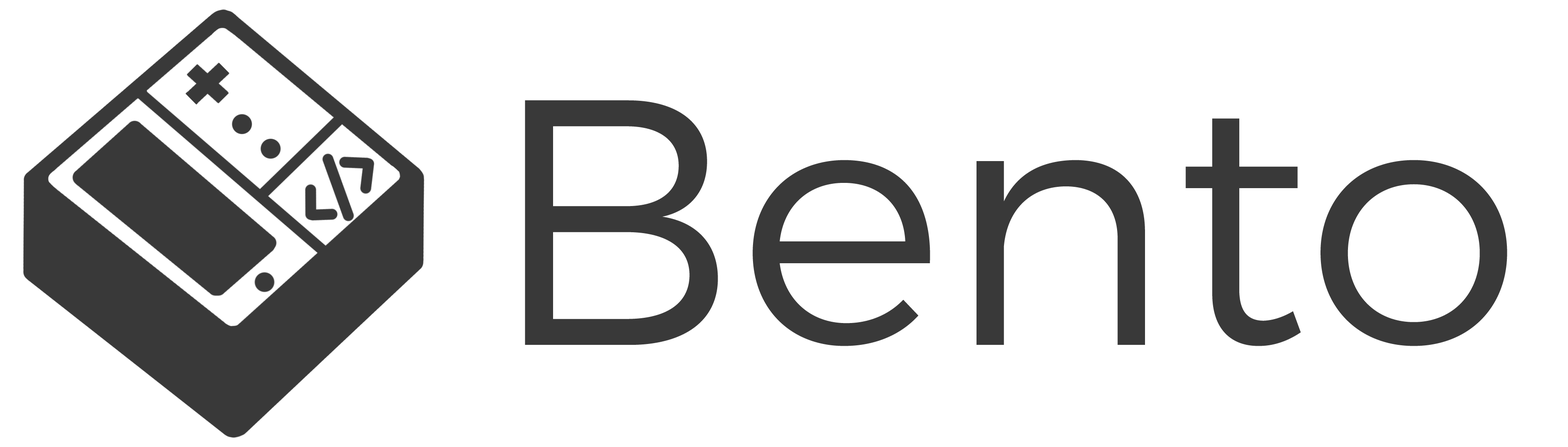
<style>
.page{position:relative;width:1568px;height:447px;background:#ffffff}
.page>*{position:absolute;margin:0}
.t1{font:349.2px "Montserrat-Light";color:#393939}
</style>
<div class="page">
<p class="t1" style="left:525px;top:100px;width:982px;height:246px">Bento</p>
</div>
